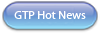
<style>
.page{position:relative;width:100px;height:33px}
.page>*{position:absolute;margin:0}
.t1{font:11.9px "MyriadPro-Regular";color:#ffffff}
</style>
<div class="page">
<p class="t1" style="left:14px;top:11px;width:72px;height:8px">GTP Hot News</p>
</div>
